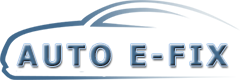
<style>
.page{position:relative;width:240px;height:80px;background:#ffffff}
.page>*{position:absolute;margin:0}
.t1{font:29.3px "Tahoma-Bold";letter-spacing:0.14em}
</style>
<div class="page">
<p class="t1" style="left:17px;top:43px;width:211px;height:23px">AUTO E-FIX</p>
</div>
